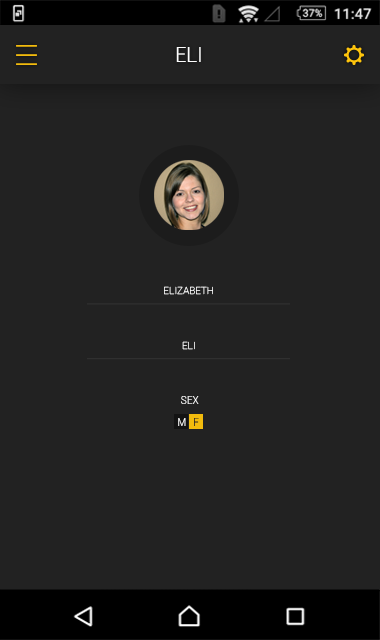
<style>
.page{position:relative;width:380px;height:640px;background:#222222}
.page>*{position:absolute;margin:0}
.t1{font:20px "Roboto-Light";color:#fefefe}
.t2{font:10px "Roboto-Thin";color:#ffffff}
.t3{font:10px "Roboto-Light";color:#fefefe}
.t4{font:10px "Roboto-Light"}
</style>
<div class="page">
<p class="t1" style="left:176px;top:47px;width:25px;height:15px">ELI</p>
<p class="t2" style="left:164px;top:286px;width:49px;height:9px">ELIZABETH</p>
<p class="t2" style="left:182px;top:341px;width:13px;height:9px">ELI</p>
<p class="t3" style="left:181px;top:396px;width:18px;height:8px">SEX</p>
<p class="t3" style="left:178px;top:418px;width:8px;height:8px">M</p>
<p class="t4" style="left:194px;top:418px;width:5px;height:8px">F</p>
</div>
